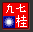
<style>
.page{position:relative;width:33px;height:32px;background:#f20000}
.page>*{position:absolute;margin:0}
.t1{font:10.4px "SimSun";color:#ffffff}
.t2{font:11.7px "SimSun";color:#ffffff}
</style>
<div class="page">
<p class="t1" style="left:6px;top:4px;width:20px;height:9px">九七</p>
<p class="t2" style="left:16px;top:15px;width:11px;height:12px">桂</p>
</div>
